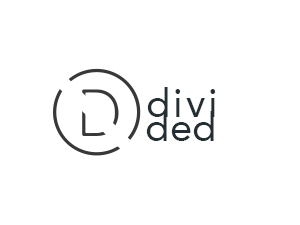
<style>
.page{position:relative;width:300px;height:225px;background:#ffffff}
.page>*{position:absolute;margin:0}
.t1{font:39.9px "Avenir-Roman";letter-spacing:0.075em;color:#232f33}
.t2{font:39.9px "Avenir-Roman";color:#232f33}
</style>
<div class="page">
<p class="t1" style="left:147px;top:87px;width:69px;height:30px">divi</p>
<p class="t2" style="left:146px;top:111px;width:68px;height:30px">ded</p>
</div>
